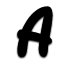
<style>
.page{position:relative;width:70px;height:70px;background:#ffffff}
.page>*{position:absolute;margin:0}
.t1{font:66.4px "KestoySelfie";color:#000000}
</style>
<div class="page">
<p class="t1" style="left:17px;top:6px;width:36px;height:51px">A</p>
</div>
